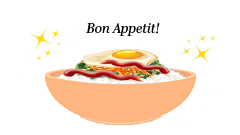
<style>
.page{position:relative;width:240px;height:135px;background:#ffffff}
.page>*{position:absolute;margin:0}
.t1{font:14px "AbrilDisplay-Italic";color:#000000}
</style>
<div class="page">
<p class="t1" style="left:86px;top:23px;width:74px;height:13px">Bon Appetit!</p>
</div>
